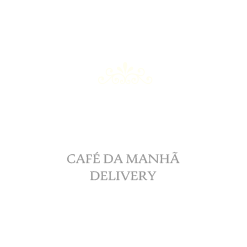
<style>
.page{position:relative;width:247px;height:247px;background:#ffffff}
.page>*{position:absolute;margin:0}
.t1{font:14px "UrduTypesetting";color:#979797}
</style>
<div class="page">
<p class="t1" style="left:67px;top:151px;width:113px;height:30px;text-align:center">CAFÉ DA MANHÃ<br>DELIVERY</p>
</div>
